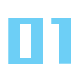
<style>
.page{position:relative;width:80px;height:80px;background:#ffffff}
.page>*{position:absolute;margin:0}
.t1{font:60px "MStiffHeiHK-UltraBold";color:#6dcff6}
</style>
<div class="page">
<p class="t1" style="left:8px;top:18px;width:63px;height:46px">01</p>
</div>
